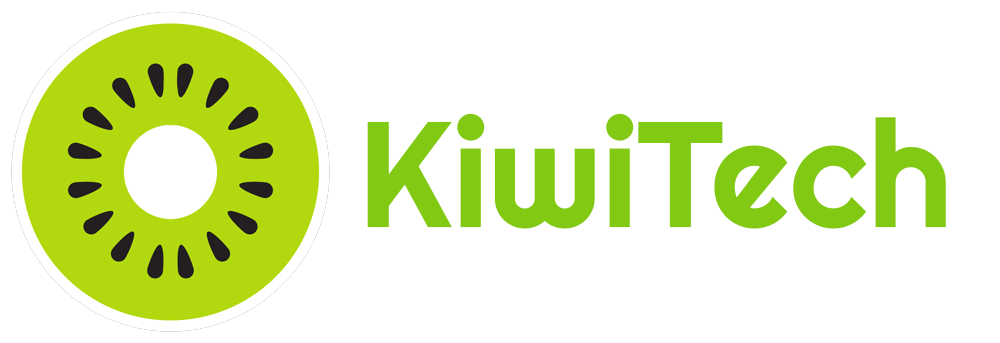
<style>
.page{position:relative;width:1000px;height:343px;background:#ffffff}
.page>*{position:absolute;margin:0}
.t1{font:150px "Righteous-Regular";color:#82c914}
.t2{font:60px "Consolas-Bold";color:#82c914}
</style>
<div class="page">
<p class="t1" style="left:367px;top:113px;width:579px;height:116px"><span class="t2"><br></span>KiwiTech</p>
</div>
